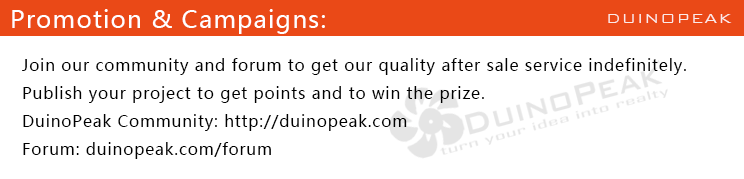
<style>
.page{position:relative;width:744px;height:179px;background:#ffffff}
.page>*{position:absolute;margin:0}
.t1{font:24px "MicrosoftYaHei";letter-spacing:0.05em;color:#ffffff}
.t2{font:18px "BankGothicBT-Light";letter-spacing:0.05em;color:#ffffff}
.t3{font:16px "MicrosoftYaHei";letter-spacing:0.05em;color:#000000}
</style>
<div class="page">
<p class="t1" style="left:12px;top:9px;width:313px;height:25px">Promotion &amp; Campaigns:</p>
<p class="t2" style="left:608px;top:14px;width:124px;height:9px;opacity:0.85">DUINOPEAK</p>
<p class="t3" style="left:22px;top:58px;width:664px;height:101px">Join our community and forum to get our quality after sale service indefinitely.<br>Publish your project to get points and to win the prize.<br>DuinoPeak Community: http://duinopeak.com<br>Forum: duinopeak.com/forum</p>
</div>
